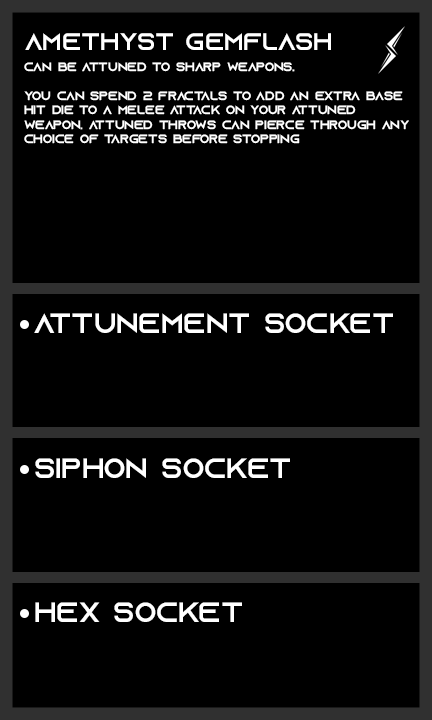
<style>
.page{position:relative;width:432px;height:720px;background:#000000}
.page>*{position:absolute;margin:0}
.t1{font:24px "AzonixRegular";color:#ffffff}
.t2{font:12px "AzonixRegular";color:#ffffff}
.t3{font:28px "AzonixRegular";color:#ffffff}
</style>
<div class="page">
<p class="t1" style="left:25px;top:33px;width:306px;height:17px">amethyst gemflash</p>
<p class="t2" style="left:24px;top:62px;width:385px;height:82px">can be attuned to sharp weapons.<br><br>you can spend 2 fractals to add an extra base<br>hit die to a melee attack on your attuned <br>weapon. attuned throws can pierce through any <br>choice of targets before stopping</p>
<p class="t3" style="left:34px;top:313px;width:359px;height:20px">attunement socket</p>
<p class="t3" style="left:35px;top:458px;width:255px;height:20px">siphon socket</p>
<p class="t3" style="left:35px;top:602px;width:207px;height:20px">hex socket</p>
</div>
